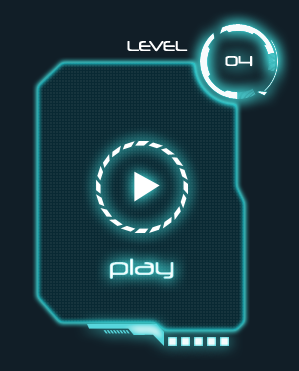
<style>
.page{position:relative;width:299px;height:371px;background:#111e27}
.page>*{position:absolute;margin:0}
.t1{font:13.6px "Neuropol-Regular";color:#ffffff}
.t2{font:22.6px "Neuropol-Regular"}
</style>
<div class="page">
<p class="t1" style="left:127px;top:41px;width:61px;height:11px">LEVEL</p>
<p class="t1" style="left:225px;top:56px;width:28px;height:11px">04</p>
<p class="t2" style="left:109px;top:258px;width:65px;height:21px">play</p>
</div>
